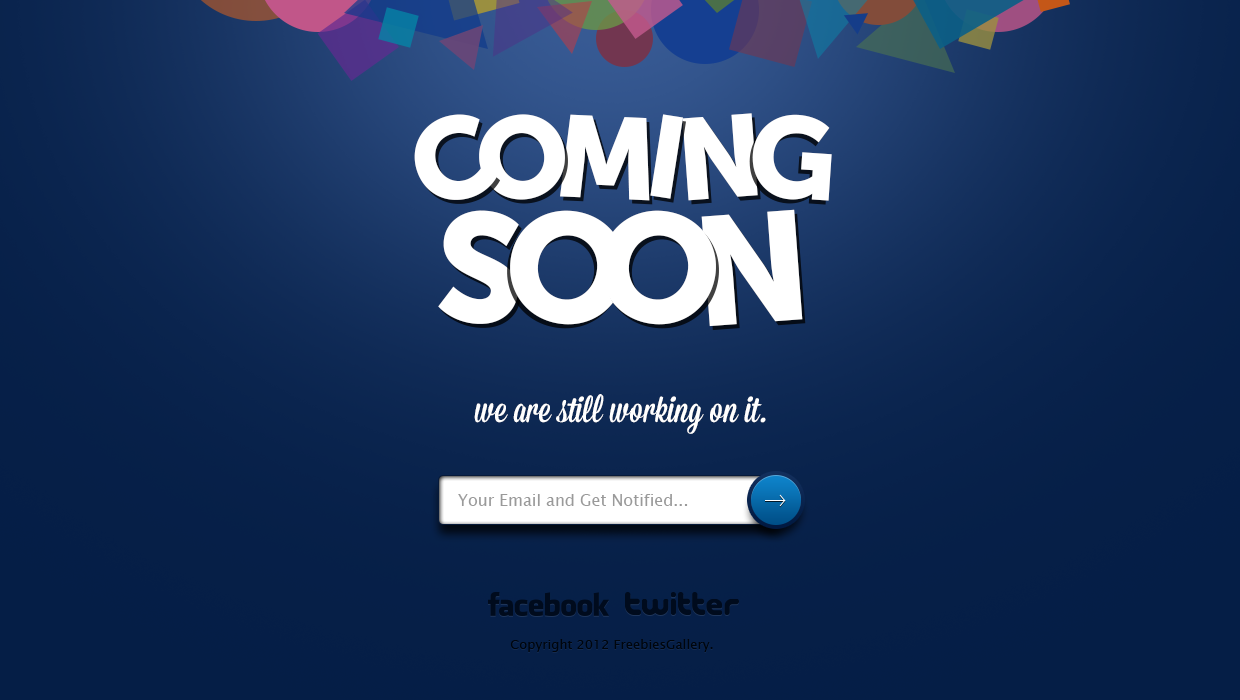
<style>
.page{position:relative;width:1240px;height:700px}
.page>*{position:absolute;margin:0}
.t1{font:114.7px "MuseoSans-900";color:#ffffff;text-transform:uppercase}
.t2{font:153.4px "MuseoSans-900";color:#ffffff;text-transform:uppercase}
.t3{font:36px "Mission-Script";color:#ffffff}
.t4{font:16px "LucidaSansUnicode";color:#9a9a9a}
.t5{font:13px "LucidaSansUnicode";color:#020a18}
</style>
<div class="page">
<p class="t1" style="left:682px;top:113px;width:76px;height:88px;rotate:-4deg">n</p>
<p class="t1" style="left:414px;top:114px;width:84px;height:86px;rotate:-15deg">c</p>
<p class="t1" style="left:479px;top:114px;width:86px;height:86px;rotate:-12deg">o</p>
<p class="t1" style="left:560px;top:114px;width:90px;height:87px;rotate:3deg">m</p>
<p class="t1" style="left:650px;top:114px;width:33px;height:85px;rotate:9deg">i</p>
<p class="t1" style="left:752px;top:114px;width:80px;height:87px;rotate:4deg">G</p>
<p class="t2" style="left:701px;top:209px;width:102px;height:118px;rotate:-4deg">n</p>
<p class="t2" style="left:438px;top:210px;width:81px;height:114px;rotate:3deg">S</p>
<p class="t2" style="left:510px;top:210px;width:115px;height:115px;rotate:9deg">O</p>
<p class="t2" style="left:601px;top:210px;width:115px;height:115px;rotate:9deg">O</p>
<p class="t3" style="left:474px;top:394px;width:292px;height:40px">we are still working on it.</p>
<p class="t4" style="left:458px;top:494px;width:230px;height:12px">Your Email and Get Notified...</p>
<p class="t5" style="left:510px;top:639px;width:203px;height:13px">Copyright 2012 FreebiesGallery.</p>
</div>
